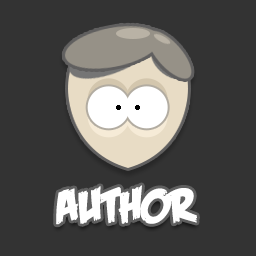
<style>
.page{position:relative;width:256px;height:256px;background:#333333}
.page>*{position:absolute;margin:0}
.t1{font:48px "FeastofFleshBB";color:#ffffff;font-weight:bold}
</style>
<div class="page">
<p class="t1" style="left:56px;top:185px;width:141px;height:40px">Author</p>
</div>
